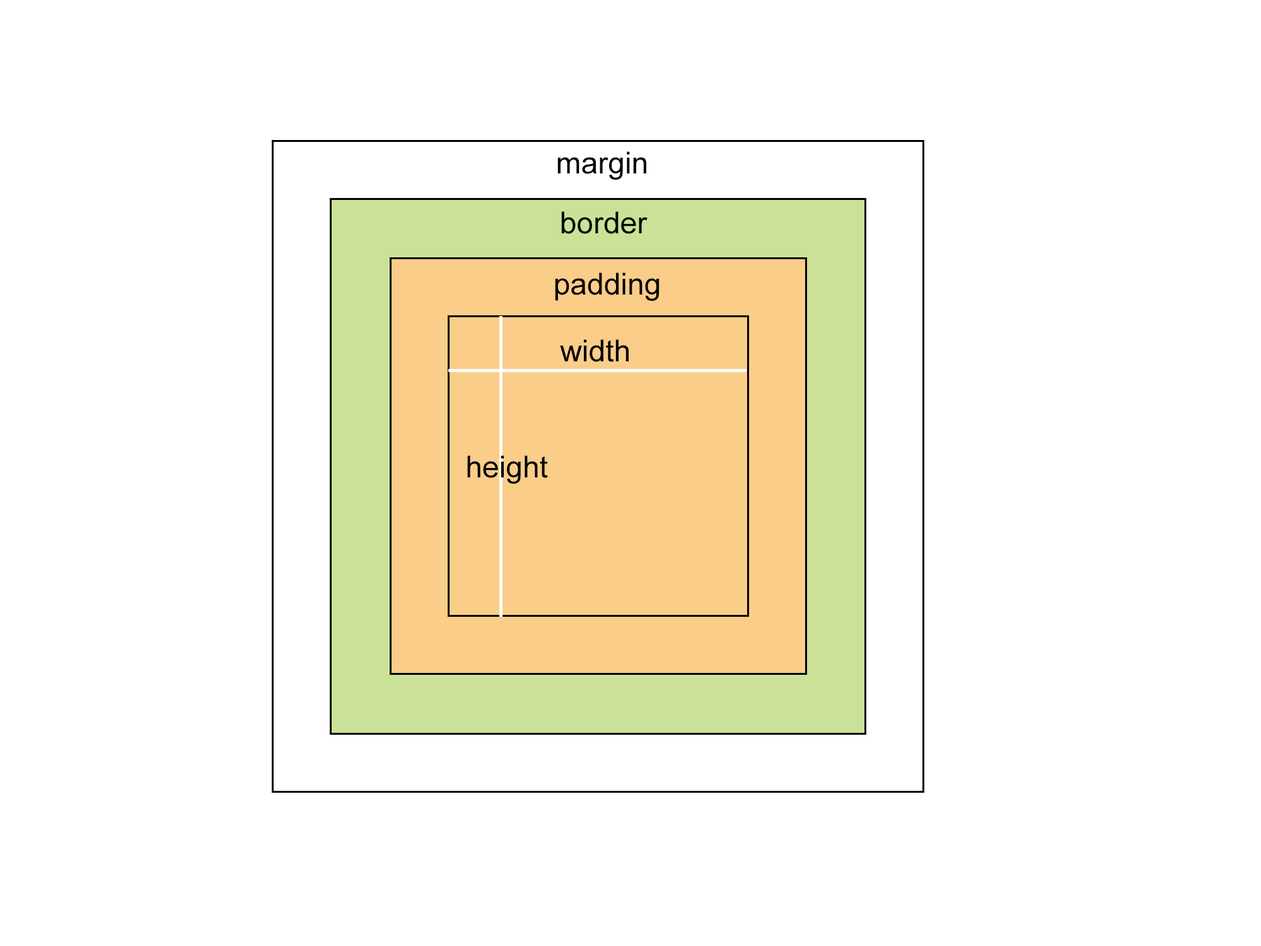
<style>
.page{position:relative;width:1261px;height:946px;background:#ffffff}
.page>*{position:absolute;margin:0}
.t1{font:30.3px "ArialMT";color:#000000}
</style>
<div class="page">
<p class="t1" style="left:557px;top:151px;width:89px;height:29px">margin</p>
<p class="t1" style="left:561px;top:211px;width:86px;height:23px">border</p>
<p class="t1" style="left:555px;top:272px;width:104px;height:29px">padding</p>
<p class="t1" style="left:560px;top:339px;width:69px;height:23px">width</p>
<p class="t1" style="left:467px;top:455px;width:81px;height:29px">height</p>
</div>
